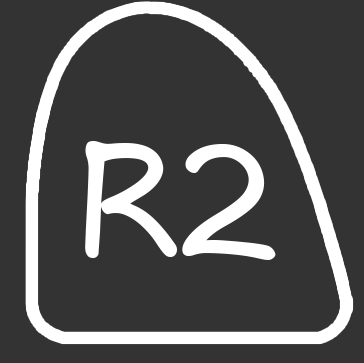
<style>
.page{position:relative;width:364px;height:363px;background:#333333}
.page>*{position:absolute;margin:0}
.t1{font:160.5px "MVBoli";color:#ffffff;text-transform:uppercase}
</style>
<div class="page">
<p class="t1" style="left:85px;top:141px;width:191px;height:119px">R2</p>
</div>
